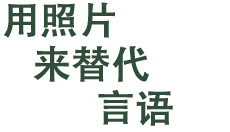
<style>
.page{position:relative;width:230px;height:132px;background:#ffffff}
.page>*{position:absolute;margin:0}
.t1{font:38.5px/43.9px "STHeitiSC-Medium";color:#193a23;font-weight:bold}
</style>
<div class="page">
<p class="t1" style="left:4px;top:2px;width:169px;height:124px;opacity:0.9">用照片<br>   来替代<br>         言语</p>
</div>
